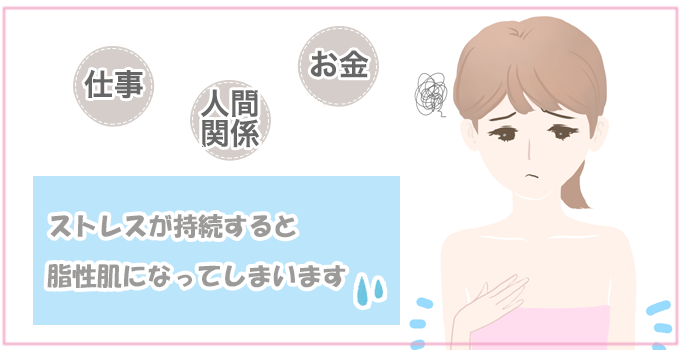
<style>
.page{position:relative;width:680px;height:350px;background:#ffffff}
.page>*{position:absolute;margin:0}
.t1{font:25px "HGSoeiKakupoptai";color:#9b9a99}
</style>
<div class="page">
<p class="t1" style="left:50px;top:214px;width:246px;height:24px">ストレスが持続すると</p>
<p class="t1" style="left:47px;top:264px;width:299px;height:24px">脂性肌になってしまいます</p>
</div>
